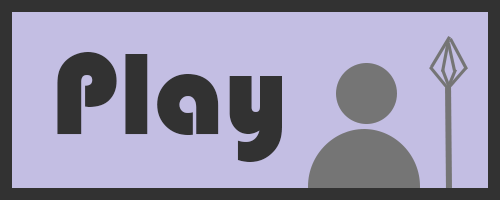
<style>
.page{position:relative;width:500px;height:200px;background:#c3bee3}
.page>*{position:absolute;margin:0}
.t1{font:120px "Bauhaus93";color:#323232}
</style>
<div class="page">
<p class="t1" style="left:57px;top:52px;width:225px;height:110px">Play</p>
</div>
